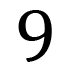
<style>
.page{position:relative;width:72px;height:72px;background:#ffffff}
.page>*{position:absolute;margin:0}
.t1{font:75px "CambriaMath";color:#000000}
</style>
<div class="page">
<p class="t1" style="left:18px;top:10px;width:34px;height:52px">9</p>
</div>
